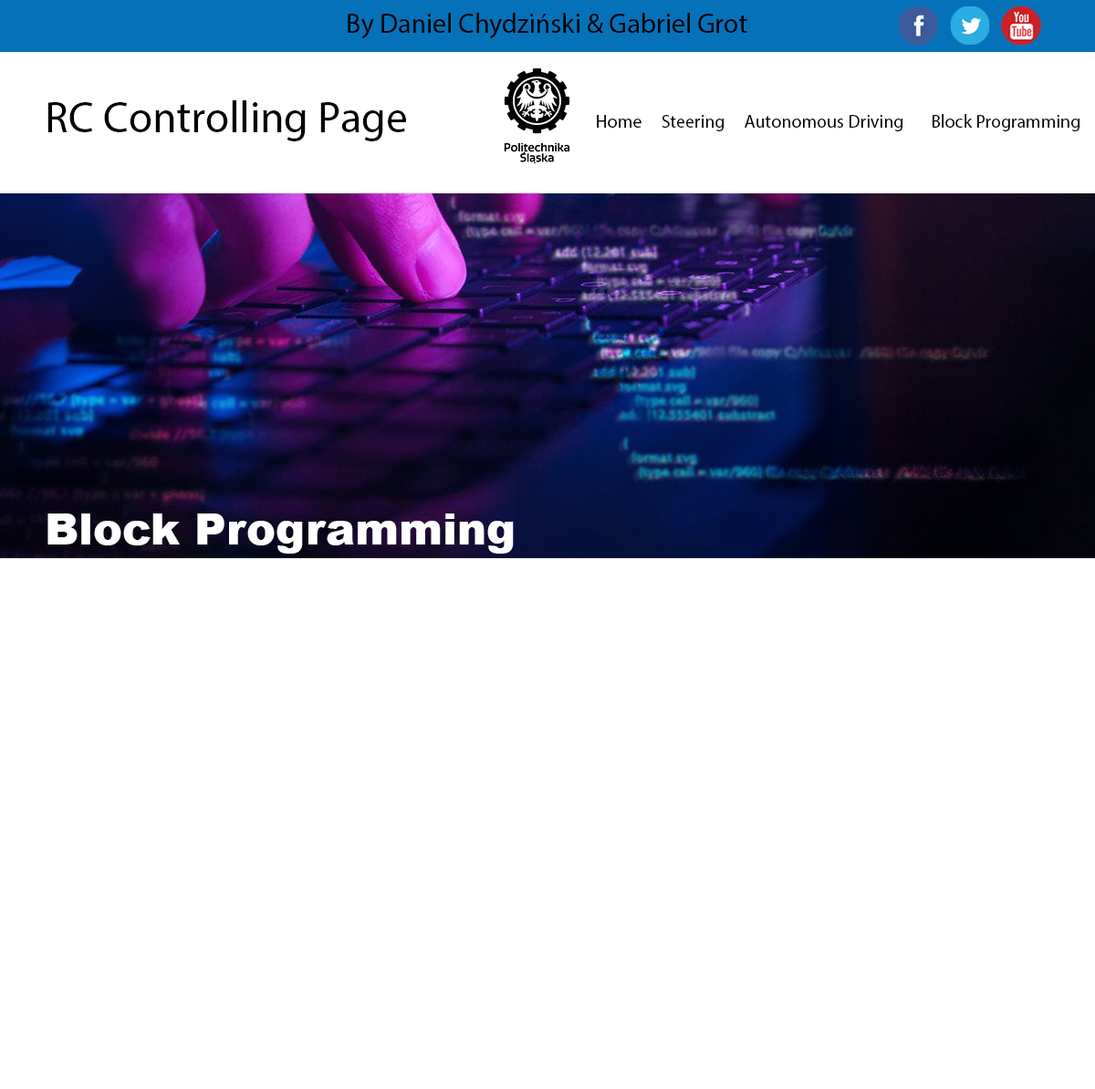
<style>
.page{position:relative;width:1095px;height:1089px;background:#ffffff}
.page>*{position:absolute;margin:0}
.t1{font:27.4px "MyriadPro-Regular";color:#000000}
.t2{font:43.8px "MyriadPro-Regular";color:#000000}
.t3{font:18.2px "MyriadPro-Regular";color:#000000}
.t4{font:43.8px "Arial-Black";color:#ffffff}
</style>
<div class="page">
<p class="t1" style="left:348px;top:13px;width:399px;height:26px">By Daniel Chydziński &amp; Gabriel Grot</p>
<p class="t2" style="left:47px;top:100px;width:359px;height:41px">RC Controlling Page</p>
<p class="t3" style="left:597px;top:114px;width:482px;height:17px">Home     Steering     Autonomous Driving       Block Programming</p>
<p class="t4" style="left:47px;top:514px;width:467px;height:40px">Block Programming</p>
</div>
